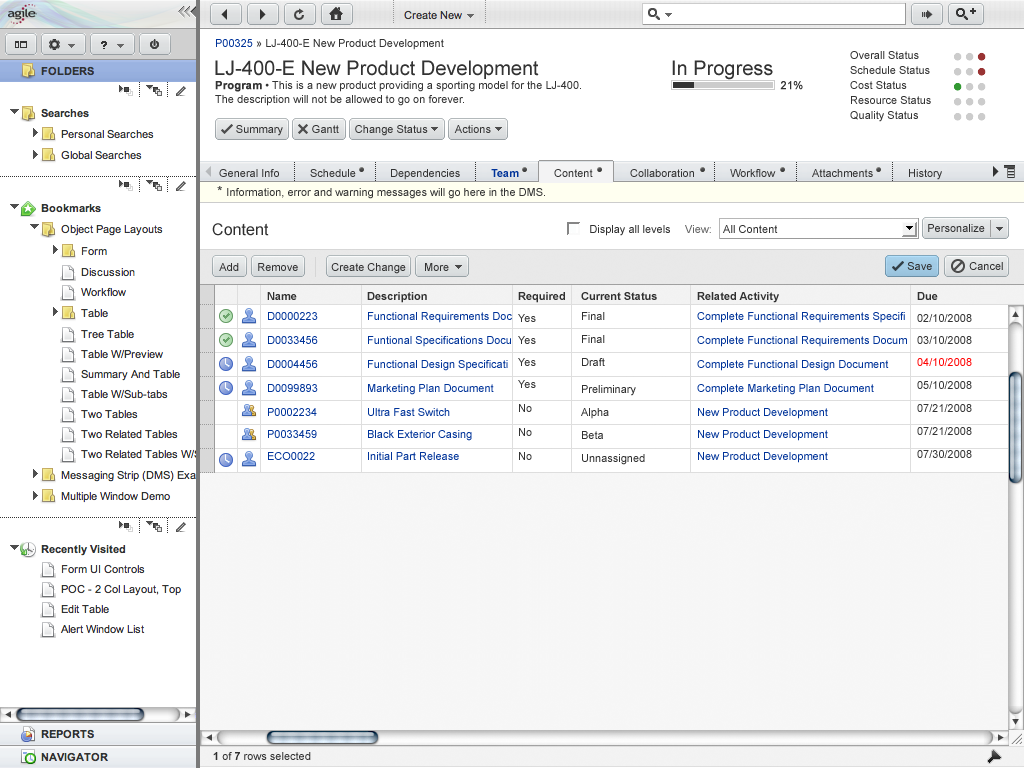
<style>
.page{position:relative;width:1024px;height:768px;background:#ffffff}
.page>*{position:absolute;margin:0}
.t1{font:11px "ArialMT";color:#333333}
.t2{font:11px "ArialMT";color:#003399}
.t3{font:20px "ArialMT";color:#333333}
.t4{font:11px/14px "ArialMT";color:#333333}
.t5{font:11px/14px "Arial-BoldMT";color:#333333;font-weight:bold}
.t6{font:11px "ArialMT";color:#333333;font-weight:bold}
.t7{font:11px "Arial-BoldMT";color:#003399}
.t8{font:14px "ArialMT";color:#333333}
.t9{font:16px "ArialMT";letter-spacing:0.005em;color:#303030}
.t10{font:11px "ArialMT";color:#303030}
.t11{font:11px "ArialMT";letter-spacing:0.005em;color:#666666}
.t12{font:11px "ArialMT";letter-spacing:0.005em;color:#303030}
.t13{font:11px/24px "ArialMT";color:#003399}
.t14{font:11px/20px "Arial-BoldMT";color:#303030}
.t15{font:11px/20px "ArialMT";color:#003399}
.t16{font:11px/22px "ArialMT";color:#003399}
.t17{font:11px/22px "ArialMT";color:#333333}
.t18{font:11px/24px "ArialMT";color:#333333}
.t19{font:11px/23px "ArialMT";color:#303030}
.t20{font:11px/20px "ArialMT";color:#303030}
.t21{font:11px/27px "ArialMT";color:#303030}
.t22{font:11px/23px "ArialMT";color:#333333}
.t23{font:11px/22px "ArialMT";color:#ff0000}
.t24{font:11px "Arial-BoldMT";color:#303030}
</style>
<div class="page">
<p class="t1" style="left:216px;top:39px;width:228px;height:11px"><span class="t2">P00325</span> » LJ-400-E New Product Development</p>
<p class="t3" style="left:215px;top:60px;width:324px;height:19px">LJ-400-E New Product Development</p>
<p class="t3" style="left:672px;top:60px;width:101px;height:20px">In Progress</p>
<p class="t4" style="left:215px;top:81px;width:366px;height:25px"><span class="t5">Program</span> • This is a new product providing a sporting model for the LJ-400.  <br>The description will not be allowed to go on forever.</p>
<p class="t6" style="left:780px;top:81px;width:23px;height:9px">21%</p>
<p class="t1" style="left:236px;top:125px;width:47px;height:11px">Summary</p>
<p class="t1" style="left:312px;top:125px;width:27px;height:8px">Gantt</p>
<p class="t1" style="left:355px;top:125px;width:73px;height:11px">Change Status</p>
<p class="t1" style="left:454px;top:125px;width:37px;height:8px">Actions</p>
<p class="t1" style="left:219px;top:169px;width:60px;height:8px">General Info</p>
<p class="t1" style="left:310px;top:169px;width:46px;height:8px">Schedule</p>
<p class="t1" style="left:391px;top:169px;width:69px;height:11px">Dependencies</p>
<p class="t7" style="left:491px;top:169px;width:28px;height:8px">Team</p>
<p class="t1" style="left:554px;top:169px;width:39px;height:8px">Content</p>
<p class="t1" style="left:630px;top:169px;width:64px;height:8px">Collaboration</p>
<p class="t1" style="left:730px;top:169px;width:46px;height:8px">Workflow</p>
<p class="t1" style="left:812px;top:169px;width:61px;height:8px">Attachments</p>
<p class="t1" style="left:909px;top:169px;width:33px;height:11px">History</p>
<p class="t1" style="left:217px;top:186px;width:328px;height:13px"><span class="t8">* </span>Information, error and warning messages will go here in the DMS.</p>
<p class="t9" style="left:212px;top:223px;width:57px;height:13px">Content</p>
<p class="t10" style="left:590px;top:225px;width:80px;height:11px">Display all levels</p>
<p class="t11" style="left:685px;top:225px;width:26px;height:8px">View:</p>
<p class="t12" style="left:723px;top:225px;width:55px;height:8px">All Content</p>
<p class="t10" style="left:928px;top:224px;width:57px;height:8px">Personalize</p>
<p class="t10" style="left:219px;top:263px;width:20px;height:8px">Add</p>
<p class="t10" style="left:258px;top:263px;width:40px;height:8px">Remove</p>
<p class="t10" style="left:331px;top:263px;width:75px;height:11px">Create Change</p>
<p class="t10" style="left:425px;top:263px;width:24px;height:8px">More</p>
<p class="t10" style="left:907px;top:262px;width:25px;height:8px">Save</p>
<p class="t10" style="left:969px;top:262px;width:34px;height:8px">Cancel</p>
<p class="t13" style="left:267px;top:292px;width:51px;height:168px"><span class="t14">Name<br></span><span class="t15">D0000223<br></span>D0033456<br>D0004456<br>D0099893<br>P0002234<br><span class="t16">P0033459<br>ECO0022</span></p>
<p class="t13" style="left:367px;top:292px;width:145px;height:168px"><span class="t14">Description<br></span><span class="t15">Functional Requirements Doc<br></span>Funtional Specifications Docu<br>Functional Design Specificati<br>Marketing Plan Document<br>Ultra Fast Switch<br><span class="t16">Black Exterior Casing <br>Initial Part Release</span></p>
<p class="t17" style="left:518px;top:292px;width:47px;height:168px"><span class="t14">Required<br></span>Yes<br>Yes<br>Yes<br>Yes<br><span class="t18">No<br>No<br>No</span></p>
<p class="t19" style="left:581px;top:292px;width:76px;height:173px"><span class="t14">Current Status<br></span><span class="t20">Final<br></span>Final<br>Draft<br><span class="t21">Preliminary<br></span>Alpha<br>Beta<br>Unnassigned</p>
<p class="t13" style="left:697px;top:292px;width:210px;height:171px"><span class="t14">Related Activity<br></span><span class="t15">Complete Functional Requirements Specifi<br></span>Complete Functional Requirements Docum<br>Complete Functional Design Document<br>Complete Marketing Plan Document<br>New Product Development<br><span class="t16">New Product Development<br>New Product Development</span></p>
<p class="t22" style="left:917px;top:292px;width:55px;height:166px"><span class="t14">Due<br></span><span class="t17">02/10/2008<br>03/10/2008<br></span><span class="t23">04/10/2008<br></span>05/10/2008<br>07/21/2008<br>07/21/2008<br>07/30/2008</p>
<p class="t10" style="left:213px;top:752px;width:98px;height:8px"><span class="t24">1</span> of <span class="t24">7</span> rows selected</p>
</div>
